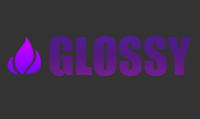
<style>
.page{position:relative;width:200px;height:119px;background:#333333}
.page>*{position:absolute;margin:0}
.t1{font:48px "Impact";color:#561b88;text-transform:uppercase}
</style>
<div class="page">
<p class="t1" style="left:49px;top:36px;width:142px;height:40px">Glossy</p>
</div>
